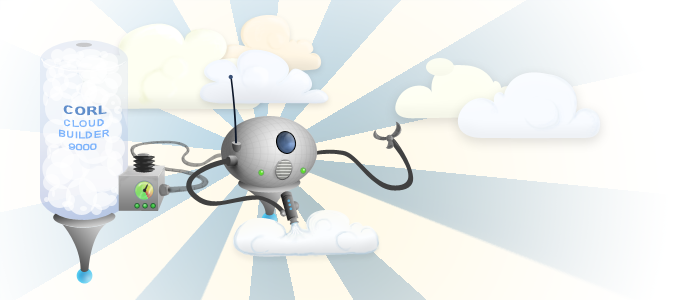
<style>
.page{position:relative;width:700px;height:300px}
.page>*{position:absolute;margin:0}
.t1{font:12px "Arial-BoldMT";letter-spacing:0.04em;color:#618ecb}
.t2{font:10px "ArialMT";color:#7fb5fc}
.t3{font:10px "ArialMT";color:#7eb4fb}
</style>
<div class="page">
<p class="t1" style="left:63px;top:105px;width:44px;height:11px">CORL</p>
<p class="t2" style="left:59px;top:119px;width:51px;height:20px;text-align:center">CLOUD<br>BUILDER</p>
<p class="t3" style="left:68px;top:143px;width:29px;height:8px">9000</p>
</div>
